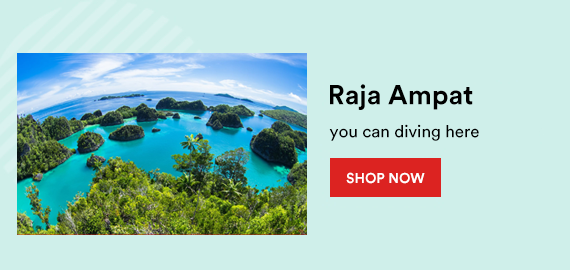
<style>
.page{position:relative;width:570px;height:270px;background:#cfefea}
.page>*{position:absolute;margin:0}
.t1{font:27.2px "CircularStd-Bold";color:#000000}
.t2{font:17.1px "CircularStd-Book";color:#000000}
.t3{font:14px "CircularStd-Bold";color:#ffffff}
</style>
<div class="page">
<p class="t1" style="left:330px;top:84px;width:143px;height:26px">Raja Ampat</p>
<p class="t2" style="left:329px;top:124px;width:150px;height:17px">you can diving here</p>
<p class="t3" style="left:346px;top:172px;width:79px;height:12px">SHOP NOW</p>
</div>
